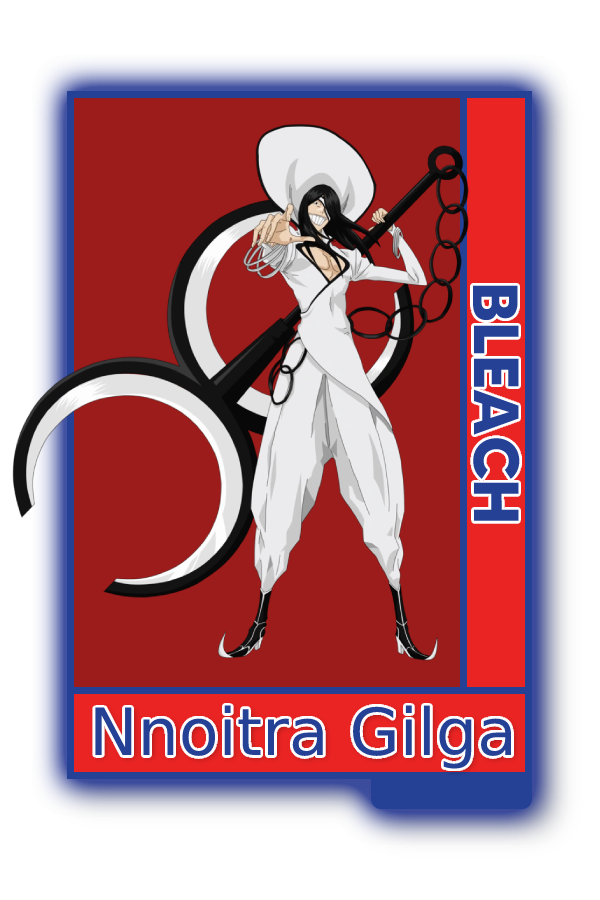
<style>
.page{position:relative;width:600px;height:900px;background:#9c1c1b}
.page>*{position:absolute;margin:0}
.t1{font:63.6px "MADETOMMY-Bold";color:#254195}
.t2{font:65px "CoolveticaRg-Regular";color:#254195}
</style>
<div class="page">
<p class="t1" style="left:473px;top:285px;width:47px;height:236px;rotate:90deg">BLEACH</p>
<p class="t2" style="left:95px;top:705px;width:417px;height:64px">Nnoitra Gilga</p>
</div>
